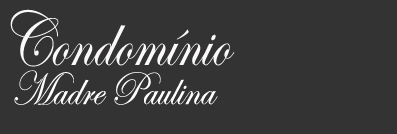
<style>
.page{position:relative;width:397px;height:134px;background:#333333}
.page>*{position:absolute;margin:0}
.t1{font:78.5px "EdwardianScriptITC";color:#fbf8f9;scale:0.79 1}
.t2{font:48px "EdwardianScriptITC";color:#fffefe;scale:0.87 1}
</style>
<div class="page">
<p class="t1" style="left:10px;top:9px;width:225px;height:58px">Condomínio</p>
<p class="t2" style="left:14px;top:70px;width:204px;height:35px">Madre Paulina</p>
</div>
